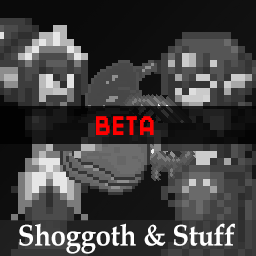
<style>
.page{position:relative;width:256px;height:256px}
.page>*{position:absolute;margin:0}
.t1{font:30px "Hobo";color:#ff0000;scale:0.9 1}
.t2{font:30px "BookAntiqua-Bold";color:#ffffff;scale:0.9 1}
</style>
<div class="page">
<p class="t1" style="left:96px;top:116px;width:58px;height:19px">BETA</p>
<p class="t2" style="left:19px;top:223px;width:216px;height:31px">Shoggoth &amp; Stuff</p>
</div>
